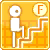
<style>
.page{position:relative;width:50px;height:50px}
.page>*{position:absolute;margin:0}
.t1{font:13.4px "AmiraParadiso";color:#fa830c}
</style>
<div class="page">
<p class="t1" style="left:37px;top:5px;width:7px;height:9px">F</p>
</div>
